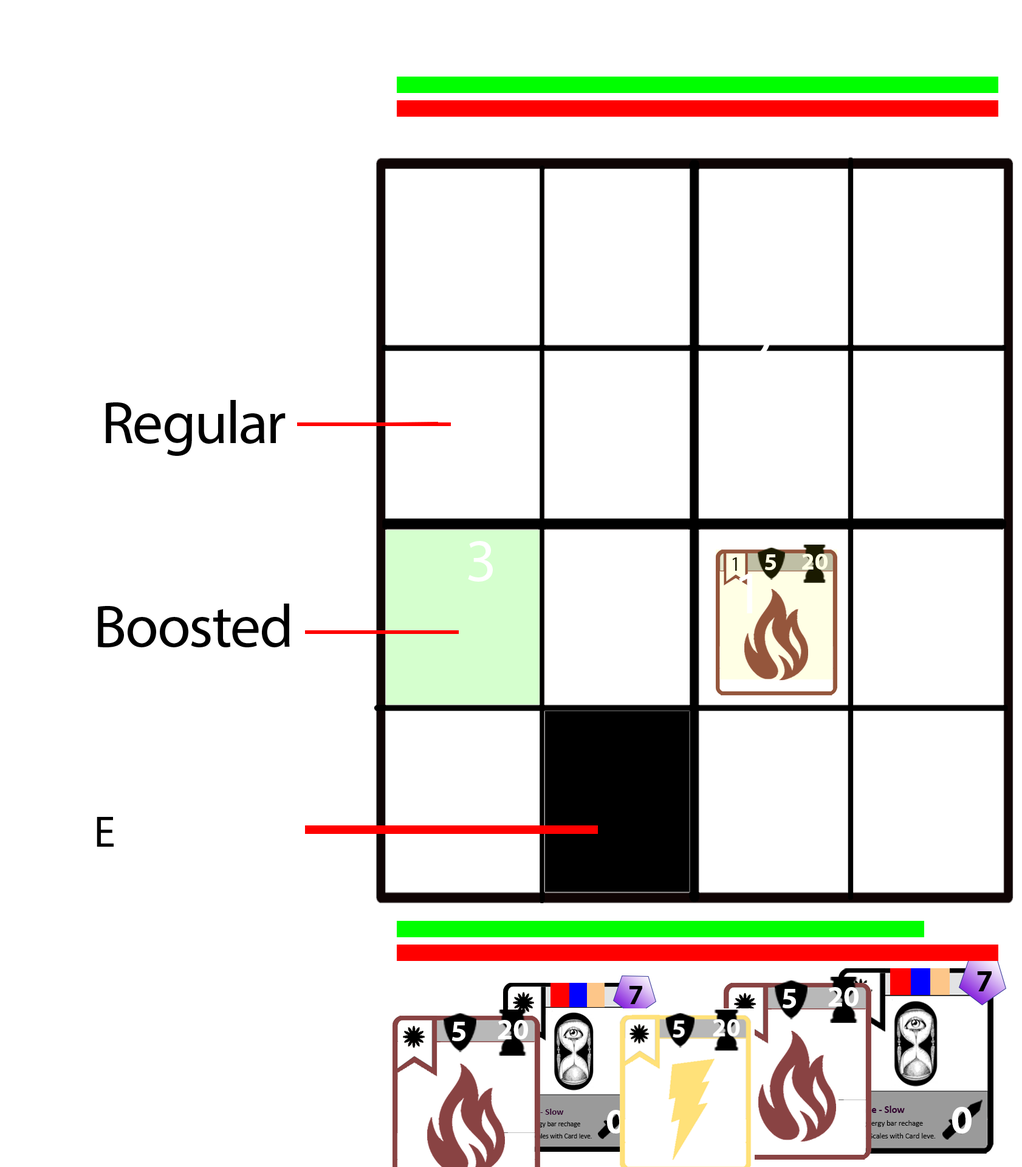
<style>
.page{position:relative;width:1022px;height:1167px;background:#ffffff}
.page>*{position:absolute;margin:0}
.t1{font:60.8px "MyriadPro-Regular";color:#000000}
.t2{font:60.8px "MyriadPro-Regular";color:#ffffff}
.t3{font:20px "MyriadPro-Regular";color:#1a1a00}
.t4{font:24px "MyriadPro-Bold";color:#ffffe5}
.t5{font:43.8px "MyriadPro-Regular";color:#000000}
.t6{font:30.6px "MyriadPro-Bold";color:#000000}
.t7{font:28px "MyriadPro-Bold";color:#000000}
.t8{font:29.2px "MyriadPro-Bold";color:#ffffff}
.t9{font:36.1px "MyriadPro-Bold";color:#ffffff}
.t10{font:7.7px/12.8px "Calibri";color:#000000}
.t11{font:10.2px/12.8px "Calibri-Bold";color:#330130}
.t12{font:39.6px "MyriadPro-Bold";color:#ffffff}
</style>
<div class="page">
<p class="t1" style="left:106px;top:400px;width:180px;height:56px">Regular</p>
<p class="t2" style="left:468px;top:541px;width:25px;height:41px">3</p>
<p class="t3" style="left:732px;top:557px;width:5px;height:14px">1</p>
<p class="t4" style="left:765px;top:554px;width:11px;height:16px">5</p>
<p class="t4" style="left:802px;top:554px;width:26px;height:15px">20</p>
<p class="t2" style="left:739px;top:574px;width:13px;height:39px">1</p>
<p class="t1" style="left:98px;top:603px;width:192px;height:44px">Boosted</p>
<p class="t5" style="left:97px;top:817px;width:17px;height:29px">E</p>
<p class="t6" style="left:977px;top:971px;width:15px;height:20px">7</p>
<p class="t7" style="left:630px;top:986px;width:12px;height:18px">7</p>
<p class="t8" style="left:783px;top:989px;width:13px;height:19px">5</p>
<p class="t8" style="left:828px;top:987px;width:31px;height:19px">20</p>
<p class="t8" style="left:452px;top:1021px;width:13px;height:20px">5</p>
<p class="t8" style="left:498px;top:1020px;width:30px;height:19px">20</p>
<p class="t9" style="left:607px;top:1110px;width:18px;height:23px">0</p>
<p class="t10" style="left:847px;top:1105px;width:89px;height:34px"><span class="t11">Arcane - Slow<br></span>Rival energy bar rechage<br>speed. Scales with Card leve.</p>
<p class="t12" style="left:952px;top:1107px;width:20px;height:26px">0</p>
</div>
